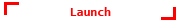
<style>
.page{position:relative;width:182px;height:23px;background:#ffffff}
.page>*{position:absolute;margin:0}
.t1{font:12.5px "Consolas-Bold";color:#ff0000}
</style>
<div class="page">
<p class="t1" style="left:70px;top:7px;width:41px;height:9px">Launch</p>
</div>
